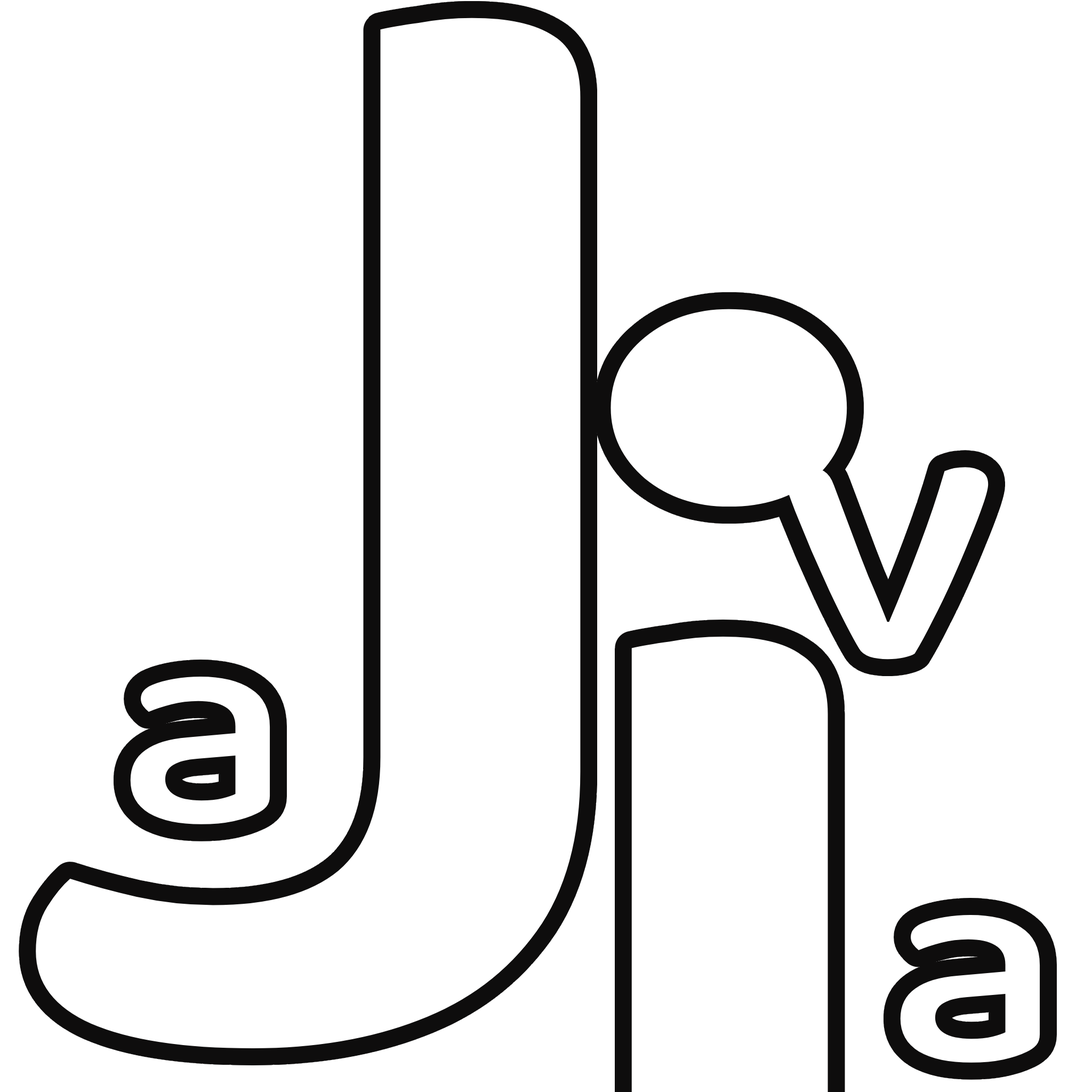
<style>
.page{position:relative;width:1092px;height:1092px;background:#ffffff}
.page>*{position:absolute;margin:0}
.t1{font:396.6px "Baloo2-Medium";color:#ffffff;scale:1.16 1}
.t2{font:297.5px "Baloo2-Medium";color:#ffffff;scale:1.16 1}
</style>
<div class="page">
<p class="t1" style="left:783px;top:467px;width:206px;height:193px">v</p>
<p class="t2" style="left:130px;top:677px;width:140px;height:147px">a</p>
<p class="t2" style="left:900px;top:915px;width:140px;height:148px">a</p>
</div>
